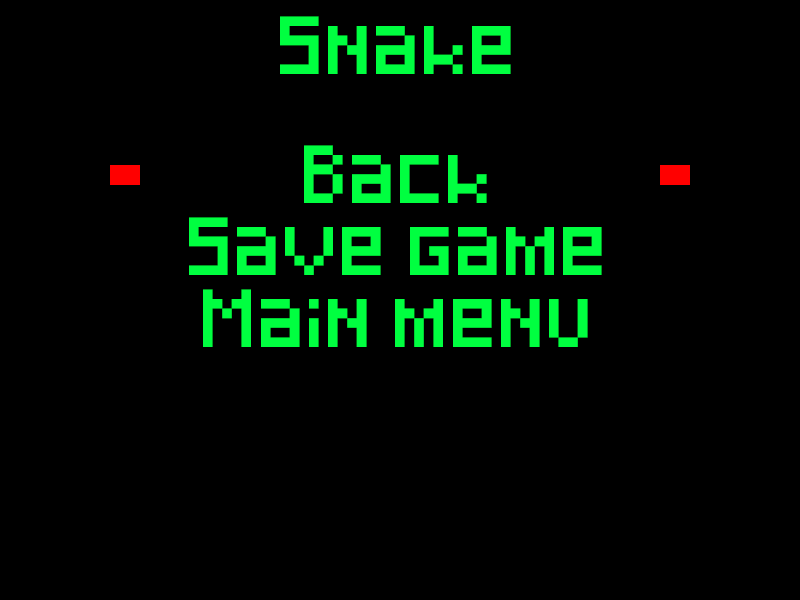
<style>
.page{position:relative;width:800px;height:600px;background:#000000}
.page>*{position:absolute;margin:0}
.t1{font:48px/72px "Pixeled";color:#00ff40}
.t2{font:12px "Pixeled";color:#00ff40}
.t3{font:48px "Pixeled";color:#00ff40}
</style>
<div class="page">
<p class="t1" style="left:189px;top:16px;width:413px;height:331px;text-align:center"><span class="t2"><br></span><span class="t3">Snake<br><br></span>Back<br>Save game<br>Main menu</p>
</div>
